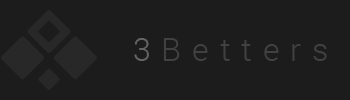
<style>
.page{position:relative;width:350px;height:100px;background:#1c1c1c}
.page>*{position:absolute;margin:0}
.t1{font:32px "Roboto-Light";letter-spacing:0.34em;color:#414141}
.t2{font:32px "Roboto-Light";letter-spacing:0.34em;color:#646464}
</style>
<div class="page">
<p class="t1" style="left:134px;top:38px;width:193px;height:23px"><span class="t2">3</span>Betters</p>
</div>
